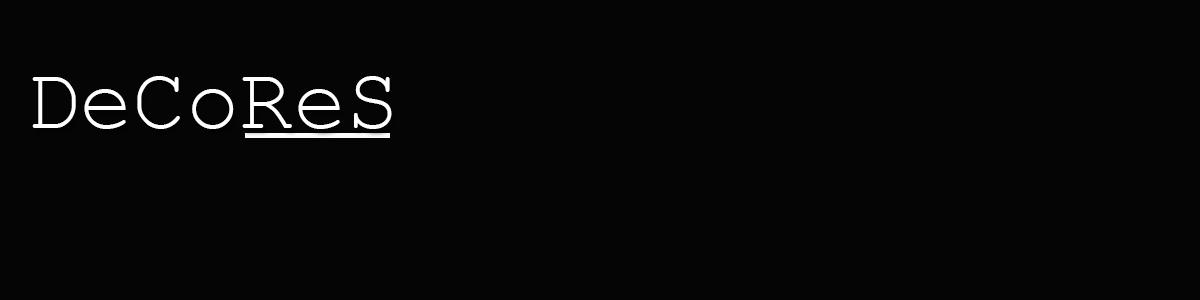
<style>
.page{position:relative;width:1200px;height:300px;background:#050505}
.page>*{position:absolute;margin:0}
.t1{font:89px "CourierNewPSMT";color:#ffffff}
</style>
<div class="page">
<p class="t1" style="left:32px;top:76px;width:360px;height:53px">DeCoReS</p>
</div>
